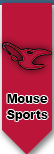
<style>
.page{position:relative;width:54px;height:154px;background:#bb163a}
.page>*{position:absolute;margin:0}
.t1{font:11.7px "Arial-Black";letter-spacing:-0.01em;color:#000000}
</style>
<div class="page">
<p class="t1" style="left:7px;top:94px;width:41px;height:9px">Mouse</p>
<p class="t1" style="left:6px;top:110px;width:42px;height:11px">Sports</p>
</div>
